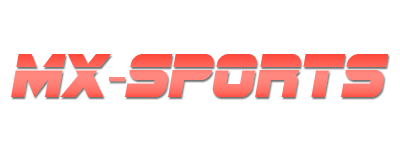
<style>
.page{position:relative;width:400px;height:150px;background:#ffffff}
.page>*{position:absolute;margin:0}
.t1{font:65px "SFSportsNight"}
.t2{font:65px "MyriadPro-Regular"}
</style>
<div class="page">
<p class="t1" style="left:11px;top:54px;width:378px;height:43px">mX<span class="t2">-</span>SPORTS</p>
</div>
